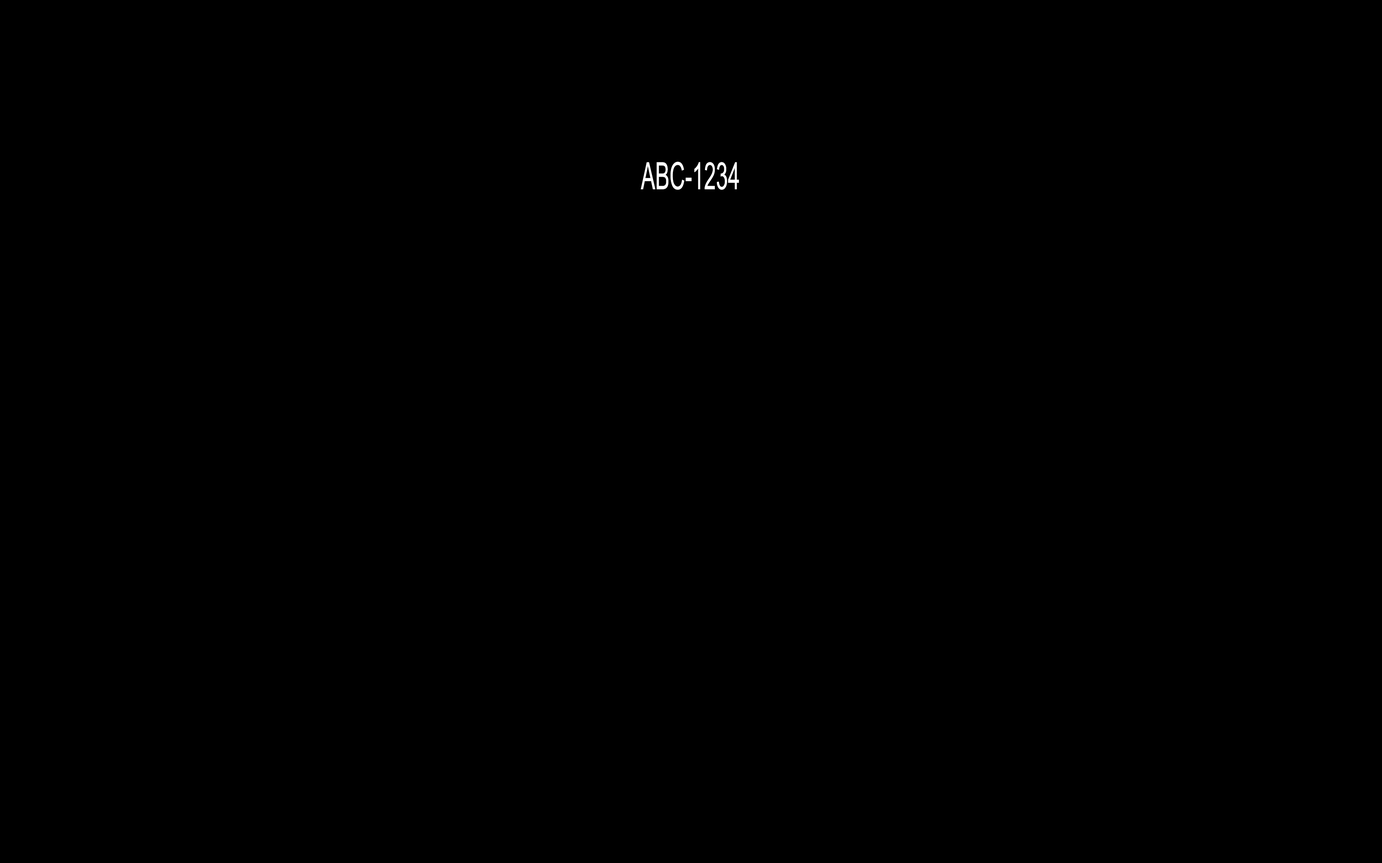
<style>
.page{position:relative;width:1382px;height:863px;background:#000000}
.page>*{position:absolute;margin:0}
.t1{font:32.9px "BrowalliaNew";color:#ffffff}
</style>
<div class="page">
<p class="t1" style="left:641px;top:161px;width:98px;height:29px">ABC-1234</p>
</div>
